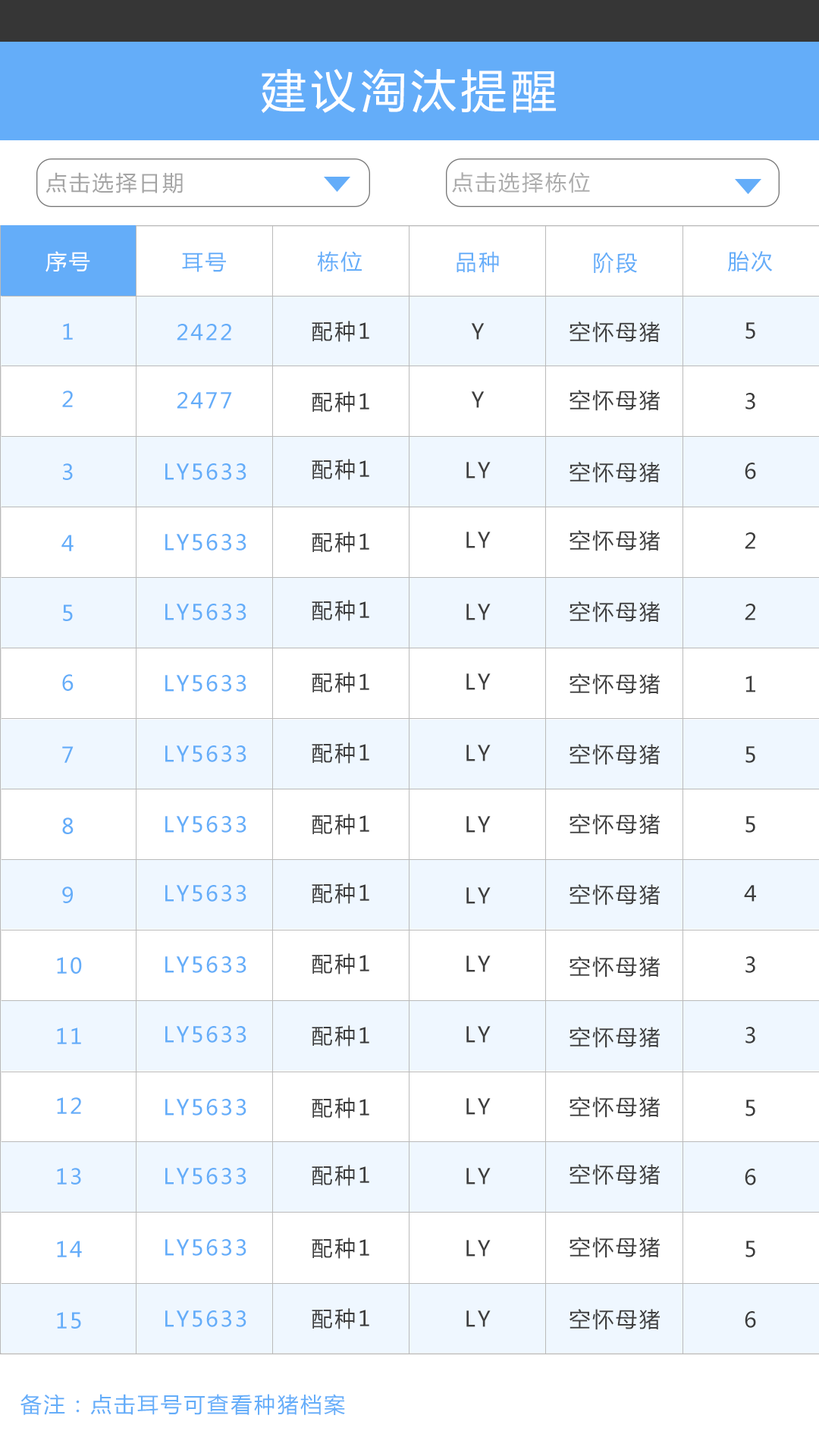
<style>
.page{position:relative;width:819px;height:1456px;background:#ffffff}
.page>*{position:absolute;margin:0}
.t1{font:45.5px "MicrosoftYaHei";letter-spacing:0.1em;color:#ffffff}
.t2{font:21.2px "MicrosoftYaHei";letter-spacing:0.1em;color:#a4a4a4}
.t3{font:21.2px "MicrosoftYaHei";letter-spacing:0.1em;color:#acacac}
.t4{font:21.2px "MicrosoftYaHei";letter-spacing:0.1em;color:#ffffff}
.t5{font:21.2px "MicrosoftYaHei";letter-spacing:0.1em;color:#64adf9}
.t6{font:21.2px "MicrosoftYaHei";letter-spacing:0.1em;color:#3c3c3c}
.t7{font:21.2px "MicrosoftYaHei";letter-spacing:0.1em;color:#3f3f3f}
.t8{font:21.2px "MicrosoftYaHei";letter-spacing:0.1em;color:#3b3b3b}
</style>
<div class="page">
<p class="t1" style="left:261px;top:68px;width:295px;height:45px">建议淘汰提醒</p>
<p class="t2" style="left:45px;top:172px;width:138px;height:21px">点击选择日期</p>
<p class="t3" style="left:452px;top:172px;width:138px;height:21px">点击选择栋位</p>
<p class="t4" style="left:45px;top:251px;width:45px;height:21px">序号</p>
<p class="t5" style="left:182px;top:253px;width:44px;height:19px">耳号</p>
<p class="t5" style="left:317px;top:251px;width:45px;height:21px">栋位</p>
<p class="t5" style="left:457px;top:251px;width:42px;height:21px">品种</p>
<p class="t5" style="left:594px;top:253px;width:43px;height:21px">阶段</p>
<p class="t5" style="left:728px;top:251px;width:45px;height:21px">胎次</p>
<p class="t5" style="left:63px;top:323px;width:10px;height:17px">1</p>
<p class="t5" style="left:177px;top:324px;width:54px;height:16px">2422</p>
<p class="t6" style="left:312px;top:321px;width:57px;height:21px">配种1</p>
<p class="t7" style="left:471px;top:323px;width:14px;height:17px">Y</p>
<p class="t7" style="left:569px;top:322px;width:91px;height:21px">空怀母猪</p>
<p class="t8" style="left:745px;top:322px;width:10px;height:17px">5</p>
<p class="t7" style="left:569px;top:390px;width:91px;height:21px">空怀母猪</p>
<p class="t5" style="left:62px;top:391px;width:11px;height:16px">2</p>
<p class="t5" style="left:177px;top:392px;width:55px;height:17px">2477</p>
<p class="t6" style="left:312px;top:391px;width:57px;height:22px">配种1</p>
<p class="t7" style="left:471px;top:391px;width:14px;height:17px">Y</p>
<p class="t8" style="left:745px;top:393px;width:10px;height:16px">3</p>
<p class="t6" style="left:312px;top:459px;width:57px;height:21px">配种1</p>
<p class="t7" style="left:466px;top:462px;width:25px;height:17px">LY</p>
<p class="t7" style="left:569px;top:462px;width:91px;height:21px">空怀母猪</p>
<p class="t5" style="left:63px;top:463px;width:10px;height:17px">3</p>
<p class="t5" style="left:165px;top:463px;width:81px;height:17px">LY5633</p>
<p class="t8" style="left:745px;top:463px;width:11px;height:16px">6</p>
<p class="t5" style="left:165px;top:534px;width:81px;height:17px">LY5633</p>
<p class="t6" style="left:312px;top:532px;width:57px;height:21px">配种1</p>
<p class="t7" style="left:466px;top:532px;width:25px;height:16px">LY</p>
<p class="t7" style="left:569px;top:530px;width:91px;height:21px">空怀母猪</p>
<p class="t8" style="left:745px;top:532px;width:10px;height:17px">2</p>
<p class="t5" style="left:61px;top:535px;width:13px;height:16px">4</p>
<p class="t5" style="left:63px;top:604px;width:10px;height:17px">5</p>
<p class="t5" style="left:165px;top:604px;width:81px;height:16px">LY5633</p>
<p class="t6" style="left:312px;top:600px;width:57px;height:21px">配种1</p>
<p class="t7" style="left:466px;top:604px;width:25px;height:16px">LY</p>
<p class="t7" style="left:569px;top:601px;width:91px;height:22px">空怀母猪</p>
<p class="t8" style="left:745px;top:604px;width:10px;height:16px">2</p>
<p class="t5" style="left:62px;top:674px;width:12px;height:17px">6</p>
<p class="t5" style="left:165px;top:675px;width:81px;height:17px">LY5633</p>
<p class="t6" style="left:312px;top:672px;width:57px;height:21px">配种1</p>
<p class="t7" style="left:466px;top:673px;width:25px;height:17px">LY</p>
<p class="t7" style="left:569px;top:673px;width:91px;height:22px">空怀母猪</p>
<p class="t8" style="left:745px;top:676px;width:10px;height:16px">1</p>
<p class="t5" style="left:62px;top:746px;width:12px;height:17px">7</p>
<p class="t5" style="left:165px;top:745px;width:81px;height:17px">LY5633</p>
<p class="t6" style="left:312px;top:742px;width:57px;height:22px">配种1</p>
<p class="t7" style="left:466px;top:745px;width:25px;height:16px">LY</p>
<p class="t7" style="left:569px;top:744px;width:91px;height:21px">空怀母猪</p>
<p class="t8" style="left:745px;top:746px;width:10px;height:17px">5</p>
<p class="t5" style="left:62px;top:817px;width:12px;height:17px">8</p>
<p class="t5" style="left:165px;top:816px;width:81px;height:17px">LY5633</p>
<p class="t6" style="left:312px;top:814px;width:57px;height:21px">配种1</p>
<p class="t7" style="left:466px;top:816px;width:25px;height:17px">LY</p>
<p class="t7" style="left:569px;top:814px;width:91px;height:21px">空怀母猪</p>
<p class="t8" style="left:745px;top:816px;width:10px;height:17px">5</p>
<p class="t5" style="left:62px;top:886px;width:11px;height:17px">9</p>
<p class="t5" style="left:165px;top:885px;width:81px;height:17px">LY5633</p>
<p class="t6" style="left:312px;top:883px;width:57px;height:21px">配种1</p>
<p class="t7" style="left:466px;top:887px;width:25px;height:17px">LY</p>
<p class="t7" style="left:569px;top:884px;width:91px;height:21px">空怀母猪</p>
<p class="t8" style="left:744px;top:885px;width:12px;height:17px">4</p>
<p class="t6" style="left:312px;top:953px;width:57px;height:21px">配种1</p>
<p class="t5" style="left:57px;top:957px;width:25px;height:17px">10</p>
<p class="t5" style="left:165px;top:956px;width:81px;height:17px">LY5633</p>
<p class="t7" style="left:466px;top:955px;width:25px;height:17px">LY</p>
<p class="t7" style="left:569px;top:956px;width:91px;height:21px">空怀母猪</p>
<p class="t8" style="left:745px;top:956px;width:10px;height:17px">3</p>
<p class="t6" style="left:312px;top:1025px;width:57px;height:21px">配种1</p>
<p class="t5" style="left:57px;top:1028px;width:24px;height:16px">11</p>
<p class="t5" style="left:165px;top:1026px;width:81px;height:17px">LY5633</p>
<p class="t7" style="left:466px;top:1026px;width:25px;height:17px">LY</p>
<p class="t7" style="left:569px;top:1027px;width:91px;height:21px">空怀母猪</p>
<p class="t8" style="left:745px;top:1027px;width:10px;height:16px">3</p>
<p class="t5" style="left:57px;top:1097px;width:24px;height:17px">12</p>
<p class="t6" style="left:312px;top:1097px;width:57px;height:22px">配种1</p>
<p class="t7" style="left:569px;top:1097px;width:91px;height:21px">空怀母猪</p>
<p class="t5" style="left:165px;top:1099px;width:81px;height:16px">LY5633</p>
<p class="t7" style="left:466px;top:1098px;width:25px;height:17px">LY</p>
<p class="t8" style="left:745px;top:1100px;width:10px;height:16px">5</p>
<p class="t5" style="left:57px;top:1168px;width:24px;height:17px">13</p>
<p class="t5" style="left:165px;top:1168px;width:81px;height:17px">LY5633</p>
<p class="t6" style="left:312px;top:1165px;width:57px;height:21px">配种1</p>
<p class="t7" style="left:466px;top:1168px;width:25px;height:17px">LY</p>
<p class="t7" style="left:569px;top:1164px;width:91px;height:21px">空怀母猪</p>
<p class="t8" style="left:745px;top:1169px;width:11px;height:16px">6</p>
<p class="t5" style="left:57px;top:1241px;width:25px;height:16px">14</p>
<p class="t5" style="left:165px;top:1239px;width:81px;height:17px">LY5633</p>
<p class="t6" style="left:312px;top:1238px;width:57px;height:21px">配种1</p>
<p class="t7" style="left:466px;top:1240px;width:25px;height:17px">LY</p>
<p class="t7" style="left:569px;top:1237px;width:91px;height:21px">空怀母猪</p>
<p class="t8" style="left:745px;top:1241px;width:10px;height:16px">5</p>
<p class="t5" style="left:57px;top:1312px;width:24px;height:17px">15</p>
<p class="t5" style="left:165px;top:1310px;width:81px;height:17px">LY5633</p>
<p class="t6" style="left:312px;top:1308px;width:57px;height:21px">配种1</p>
<p class="t7" style="left:466px;top:1310px;width:25px;height:17px">LY</p>
<p class="t7" style="left:569px;top:1309px;width:91px;height:21px">空怀母猪</p>
<p class="t8" style="left:745px;top:1311px;width:11px;height:17px">6</p>
<p class="t5" style="left:20px;top:1394px;width:325px;height:21px">备注：点击耳号可查看种猪档案</p>
</div>
